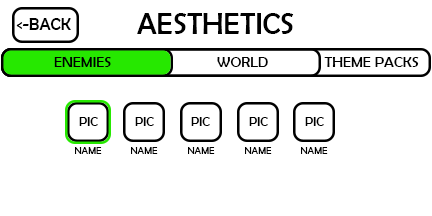
<style>
.page{position:relative;width:432px;height:216px;background:#ffffff}
.page>*{position:absolute;margin:0}
.t1{font:30px "BerlinSansFB-Reg";color:#000000}
.t2{font:17px "BerlinSansFB-Reg";color:#000000}
.t3{font:15px "BerlinSansFB-Reg";color:#000000}
.t4{font:13px "BerlinSansFB-Reg";color:#000000}
.t5{font:10px "BerlinSansFB-Reg";color:#000000}
</style>
<div class="page">
<p class="t1" style="left:137px;top:13px;width:157px;height:21px">AESTHETICS</p>
<p class="t2" style="left:16px;top:18px;width:55px;height:12px">&lt;-BACK</p>
<p class="t3" style="left:54px;top:56px;width:57px;height:11px">ENEMIES</p>
<p class="t3" style="left:217px;top:57px;width:51px;height:10px">WORLD</p>
<p class="t3" style="left:324px;top:57px;width:95px;height:10px">THEME PACKS</p>
<p class="t4" style="left:79px;top:117px;width:19px;height:9px">PIC</p>
<p class="t4" style="left:135px;top:117px;width:19px;height:9px">PIC</p>
<p class="t4" style="left:191px;top:117px;width:19px;height:9px">PIC</p>
<p class="t4" style="left:249px;top:117px;width:19px;height:9px">PIC</p>
<p class="t4" style="left:305px;top:117px;width:19px;height:9px">PIC</p>
<p class="t5" style="left:75px;top:147px;width:27px;height:7px">NAME</p>
<p class="t5" style="left:131px;top:147px;width:27px;height:7px">NAME</p>
<p class="t5" style="left:188px;top:147px;width:27px;height:7px">NAME</p>
<p class="t5" style="left:245px;top:147px;width:27px;height:7px">NAME</p>
<p class="t5" style="left:301px;top:147px;width:27px;height:7px">NAME</p>
</div>
